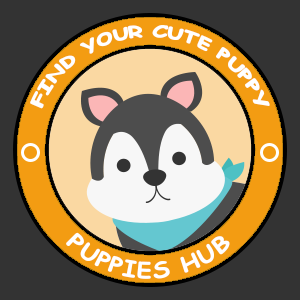
<style>
.page{position:relative;width:300px;height:300px;background:#333333}
.page>*{position:absolute;margin:0}
.t1{font:16.7px "ComicSansMS-Bold";color:#ffffff}
.t2{font:20.8px "ComicSansMS-Bold";color:#ffffff}
</style>
<div class="page">
<p class="t1" style="left:30px;top:25px;width:240px;height:84px">FIND YOUR CUTE PUPPY</p>
<p class="t2" style="left:66px;top:232px;width:164px;height:47px">PUPPIES HUB</p>
</div>
